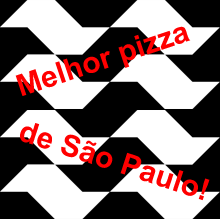
<style>
.page{position:relative;width:220px;height:219px;background:#000000}
.page>*{position:absolute;margin:0}
.t1{font:30px "Arial-BoldMT";color:#ff0000}
</style>
<div class="page">
<p class="t1" style="left:15px;top:26px;width:176px;height:70px;rotate:-18deg">Melhor pizza</p>
<p class="t1" style="left:20px;top:123px;width:190px;height:78px;rotate:18deg">de São Paulo!</p>
</div>
